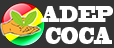
<style>
.page{position:relative;width:114px;height:48px;background:#333333}
.page>*{position:absolute;margin:0}
.t1{font:21.2px "BlackoakStd";color:#fefefe;scale:0.47 1}
.t2{font:22.1px "BlackoakStd";color:#fefefe;scale:0.45 1}
</style>
<div class="page">
<p class="t1" style="left:41px;top:6px;width:72px;height:16px">ADEP</p>
<p class="t2" style="left:45px;top:27px;width:67px;height:17px">COCA</p>
</div>
